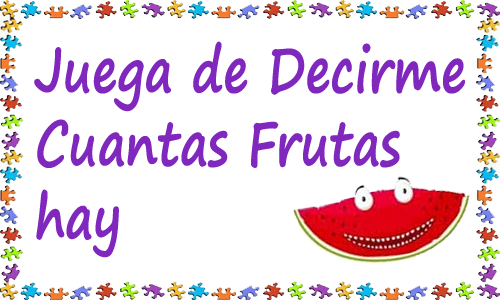
<style>
.page{position:relative;width:500px;height:300px;background:#ffffff}
.page>*{position:absolute;margin:0}
.t1{font:61.1px "SegoePrint-Bold";color:#8027be;scale:0.79 1}
</style>
<div class="page">
<p class="t1" style="left:34px;top:41px;width:431px;height:217px">Juega de Decirme<br>Cuantas Frutas<br>hay</p>
</div>
